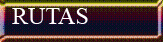
<style>
.page{position:relative;width:163px;height:42px;background:#34060f}
.page>*{position:absolute;margin:0}
.t1{font:24px "TimesNewRomanPSMT";color:#ffffff}
</style>
<div class="page">
<p class="t1" style="left:12px;top:4px;width:77px;height:27px">RUTAS</p>
</div>
